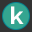
<style>
.page{position:relative;width:32px;height:32px;background:#333333}
.page>*{position:absolute;margin:0}
.t1{font:24px "Raleway-Bold";letter-spacing:0.2em;color:#ffffff;scale:1.03 1}
</style>
<div class="page">
<p class="t1" style="left:11px;top:6px;width:13px;height:18px">k</p>
</div>
